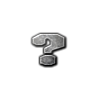
<style>
.page{position:relative;width:100px;height:100px;background:#ffffff}
.page>*{position:absolute;margin:0}
.t1{font:48px "IronmongerFBBlack"}
</style>
<div class="page">
<p class="t1" style="left:32px;top:34px;width:34px;height:32px">?</p>
</div>
